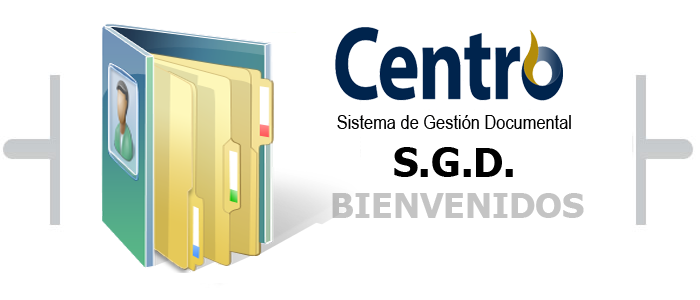
<style>
.page{position:relative;width:700px;height:300px;background:#ffffff}
.page>*{position:absolute;margin:0}
.t1{font:20px "ArialNarrow";color:#000000}
.t2{font:40px "Tahoma-Bold";color:#000000}
.t3{font:35px "Tahoma-Bold";color:#c4c4c4}
</style>
<div class="page">
<p class="t1" style="left:337px;top:115px;width:234px;height:62px;text-align:center">Sistema de Gestión Documental<br><span class="t2">S.G.D.</span></p>
<p class="t3" style="left:332px;top:193px;width:252px;height:25px">BIENVENIDOS</p>
</div>
